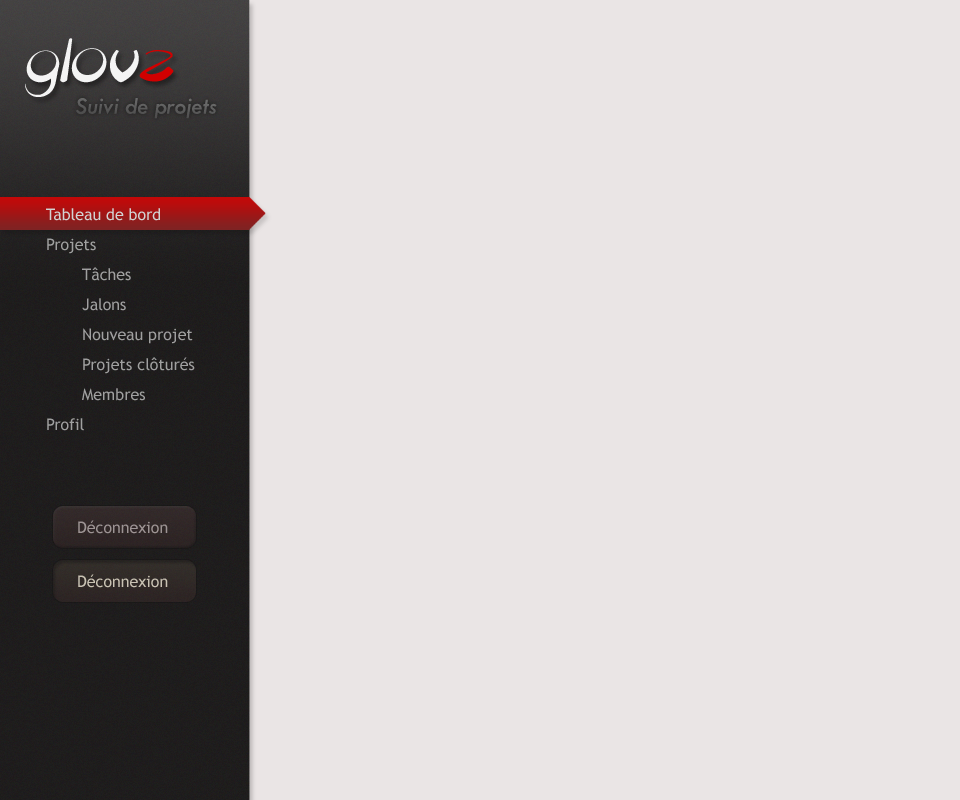
<style>
.page{position:relative;width:960px;height:800px;background:#eae5e5}
.page>*{position:absolute;margin:0}
.t1{font:72px "Discoid";color:#f4f4f4;font-style:italic}
.t2{font:72px "Discoid";color:#d10000;font-style:italic}
.t3{font:24px "TwCenMT-Italic";color:#606060}
.t4{font:16px/30px "TrebuchetMS";color:#a0a0a0}
.t5{font:16px/30px "TrebuchetMS";color:#d3d3d3}
.t6{font:16px "TrebuchetMS";color:#9d9494}
.t7{font:16px "TrebuchetMS";color:#c9c2b3}
</style>
<div class="page">
<p class="t1" style="left:25px;top:38px;width:149px;height:59px">glov<span class="t2">z</span></p>
<p class="t3" style="left:75px;top:98px;width:142px;height:21px">Suivi de projets</p>
<p class="t4" style="left:46px;top:208px;width:149px;height:223px"><span class="t5">Tableau de bord<br></span>Projets<br> Tâches<br> Jalons<br> Nouveau projet<br> Projets clôturés<br> Membres<br>Profil</p>
<p class="t6" style="left:78px;top:520px;width:90px;height:14px">Déconnexion</p>
<p class="t7" style="left:78px;top:574px;width:90px;height:14px">Déconnexion</p>
</div>
